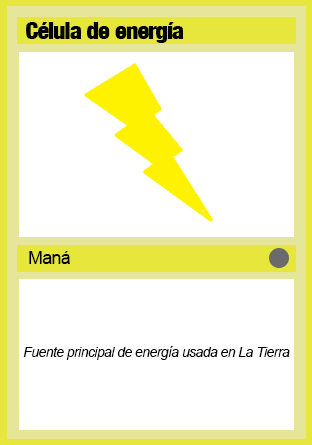
<style>
.page{position:relative;width:312px;height:445px;background:#ffffff}
.page>*{position:absolute;margin:0}
.t1{font:24px "Harvest";letter-spacing:-0.04em;color:#000000}
.t2{font:18px "ArialMT";letter-spacing:-0.04em;color:#000000}
.t3{font:14px "Arial-ItalicMT";letter-spacing:-0.04em;color:#000000}
</style>
<div class="page">
<p class="t1" style="left:26px;top:22px;width:158px;height:21px">Célula de energía</p>
<p class="t2" style="left:29px;top:251px;width:41px;height:13px">Maná</p>
<p class="t3" style="left:23px;top:346px;width:267px;height:14px">Fuente principal de energía usada en La Tierra</p>
</div>
